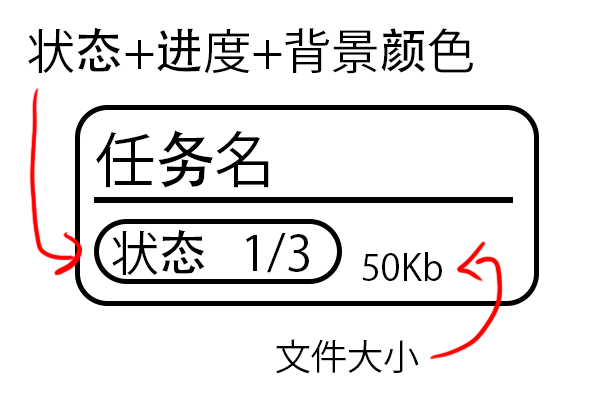
<style>
.page{position:relative;width:600px;height:400px;background:#ffffff}
.page>*{position:absolute;margin:0}
.t1{font:48px "KozGoPr6N-Regular";color:#000000}
.t2{font:48px "AdobeHeitiStd-Regular";color:#000000}
.t3{font:60px "KozGoPr6N-Regular";color:#000000}
.t4{font:60px "AdobeHeitiStd-Regular";color:#000000}
.t5{font:36px "KozGoPr6N-Regular";color:#000000}
</style>
<div class="page">
<p class="t1" style="left:28px;top:27px;width:445px;height:47px">状<span class="t2">态</span>+<span class="t2">进</span>度+背景<span class="t2">颜</span>色</p>
<p class="t3" style="left:96px;top:130px;width:173px;height:58px">任<span class="t4">务</span>名</p>
<p class="t1" style="left:112px;top:229px;width:197px;height:46px">状<span class="t2">态</span>   1/3</p>
<p class="t5" style="left:362px;top:252px;width:80px;height:29px">50Kb</p>
<p class="t5" style="left:276px;top:339px;width:143px;height:35px">文件大小</p>
</div>
